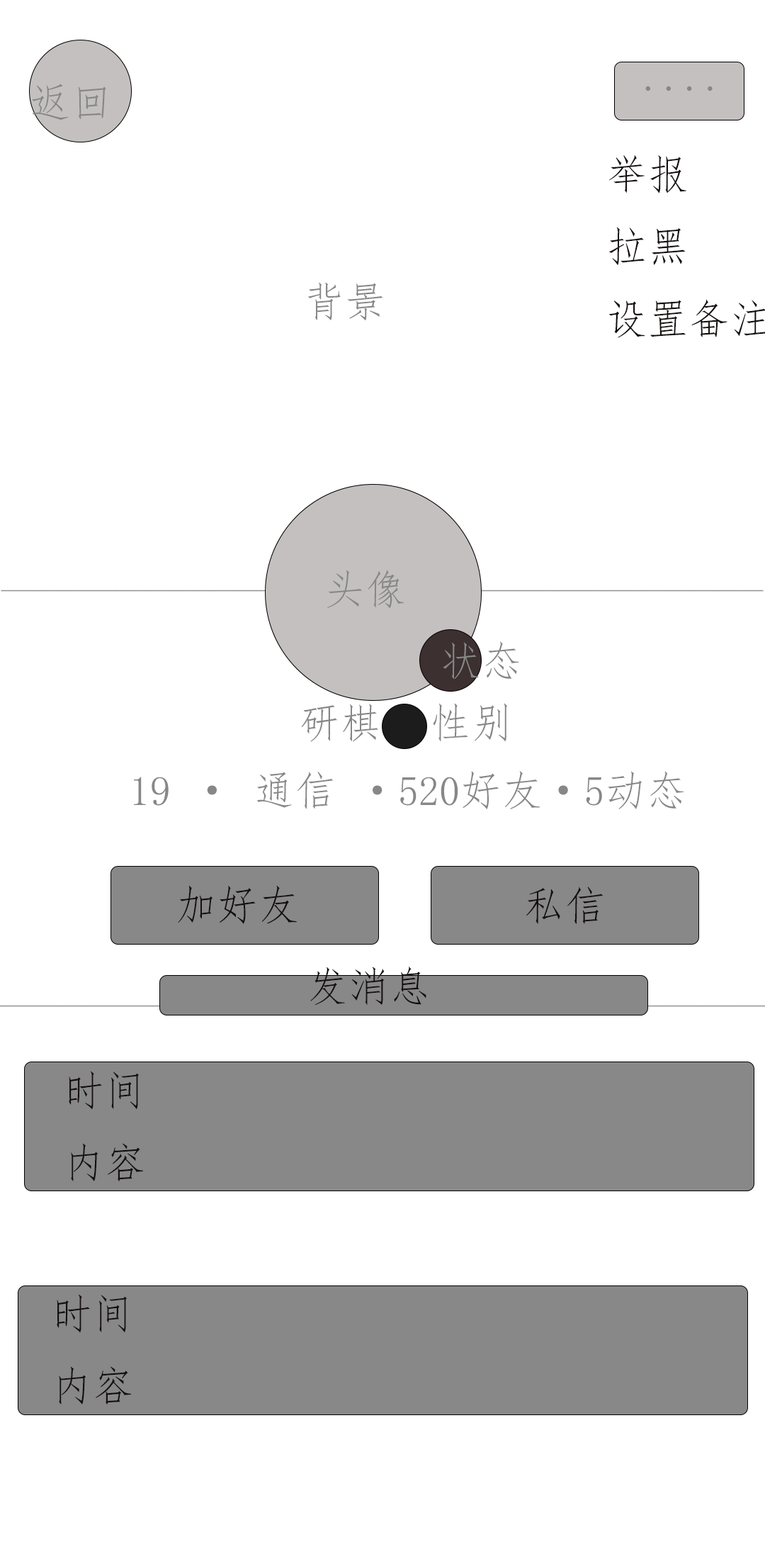
<style>
.page{position:relative;width:765px;height:1559px;background:#ffffff}
.page>*{position:absolute;margin:0}
.t1{font:41.3px "FangSong";color:#878787}
.t2{font:41.3px "FangSong";color:#151010}
</style>
<div class="page">
<p class="t1" style="left:32px;top:84px;width:74px;height:36px">返回</p>
<p class="t1" style="left:645px;top:86px;width:68px;height:5px">....</p>
<p class="t1" style="left:307px;top:282px;width:76px;height:39px">背景</p>
<p class="t1" style="left:327px;top:570px;width:77px;height:39px">头像</p>
<p class="t1" style="left:301px;top:703px;width:77px;height:39px">研棋</p>
<p class="t1" style="left:433px;top:703px;width:74px;height:39px">性别</p>
<p class="t1" style="left:134px;top:771px;width:550px;height:38px">19 · 通信 ·520好友·5动态</p>
<p class="t2" style="left:178px;top:885px;width:119px;height:39px">加好友</p>
<p class="t2" style="left:526px;top:886px;width:78px;height:38px">私信</p>
<p class="t2" style="left:310px;top:966px;width:116px;height:39px">发消息</p>
<p class="t2" style="left:69px;top:1070px;width:74px;height:111px">时间<br>内容</p>
<p class="t2" style="left:57px;top:1294px;width:74px;height:110px">时间<br>内容</p>
</div>
